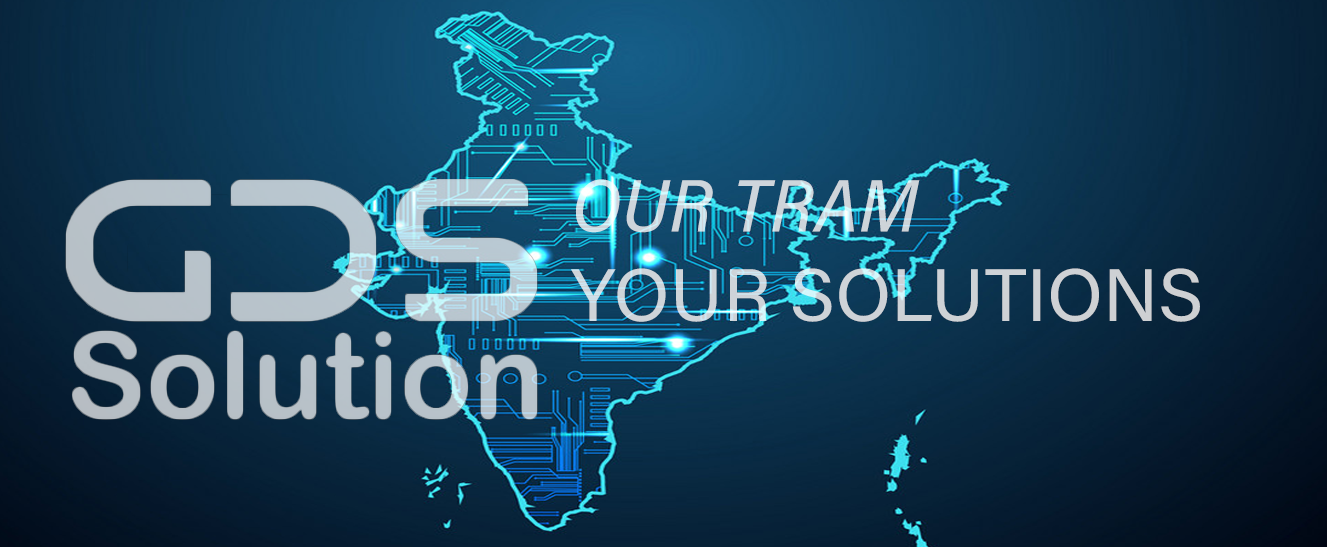
<style>
.page{position:relative;width:1327px;height:547px}
.page>*{position:absolute;margin:0}
.t1{font:74.5px "AcuminConcept-Regular";color:#ced3d9;font-style:italic}
.t2{font:74.5px/14.9px "AcuminConcept-SemiCondensedMediumItalic";color:#ced3d9;font-style:italic}
</style>
<div class="page">
<p class="t1" style="left:571px;top:179px;width:629px;height:143px"><span class="t2">OUR TRAM<br></span>YOUR SOLUTIONS</p>
</div>
